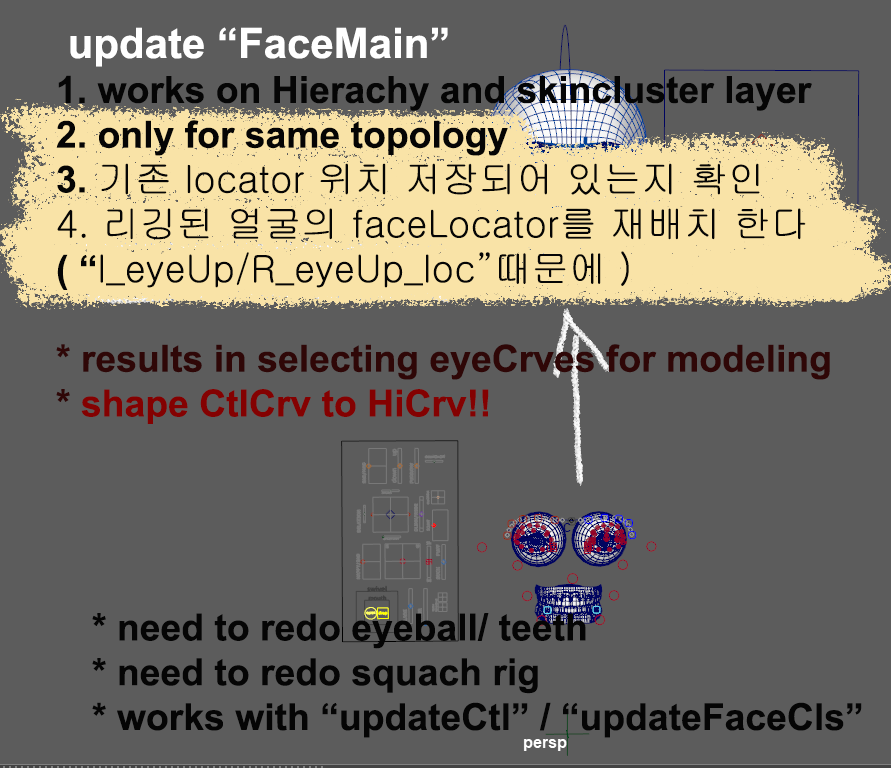
<style>
.page{position:relative;width:891px;height:768px;background:#5c5c5c}
.page>*{position:absolute;margin:0}
.t1{font:37.3px "Arial-BoldMT";color:#050505}
.t2{font:42px "Arial-BoldMT";color:#ffffff}
.t3{font:37.3px "Gulim";color:#050505}
.t4{font:37.3px "Arial-BoldMT";color:#2f0707}
.t5{font:37.3px "Arial-BoldMT";color:#840101}
</style>
<div class="page">
<p class="t1" style="left:56px;top:27px;width:806px;height:711px"><span class="t2"> update “FaceMain”<br></span>1. works on Hierachy and skincluster layer<br>2. only for same topology<br>3. <span class="t3">기존 locator 위치 저장되어 있는지 확인<br>4. 리깅된 얼굴의 faceLocator를 재배치 한다<br></span>( “<span class="t3">l_eyeUp/R_eyeUp_loc”때문에 )<br><br></span><span class="t4">* results in selecting eyeCrves for modeling<br>* </span><span class="t5">shape CtlCrv to HiCrv!!<br><br><br></span><br><br> * need to redo eyeball/ teeth<br> * need to redo squach rig<br> * works with “updateCtl” / “updateFaceCls”</p>
</div>
